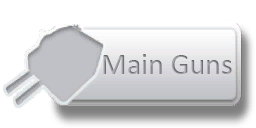
<style>
.page{position:relative;width:256px;height:128px;background:#ffffff}
.page>*{position:absolute;margin:0}
.t1{font:30px "Calibri"}
</style>
<div class="page">
<p class="t1" style="left:103px;top:54px;width:129px;height:20px">Main Guns</p>
</div>
